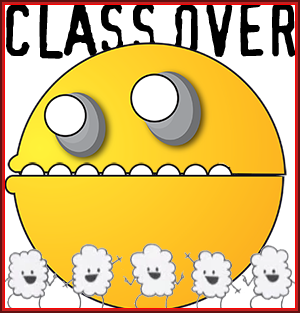
<style>
.page{position:relative;width:300px;height:313px;background:#ffffff}
.page>*{position:absolute;margin:0}
.t1{font:71.6px "Confidential";letter-spacing:-0.05em;color:#000000}
</style>
<div class="page">
<p class="t1" style="left:6px;top:1px;width:290px;height:58px">CLASS OVER</p>
</div>
